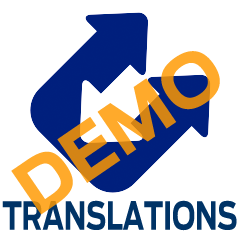
<style>
.page{position:relative;width:242px;height:242px;background:#ffffff}
.page>*{position:absolute;margin:0}
.t1{font:71px "Antenna-Bold"}
.t2{font:38px "Antenna-Bold";color:#003366;scale:0.71 1}
</style>
<div class="page">
<p class="t1" style="left:11px;top:51px;width:209px;height:164px;rotate:-34deg">DEMO</p>
<p class="t2" style="left:2px;top:200px;width:235px;height:31px">TRANSLATIONS</p>
</div>
